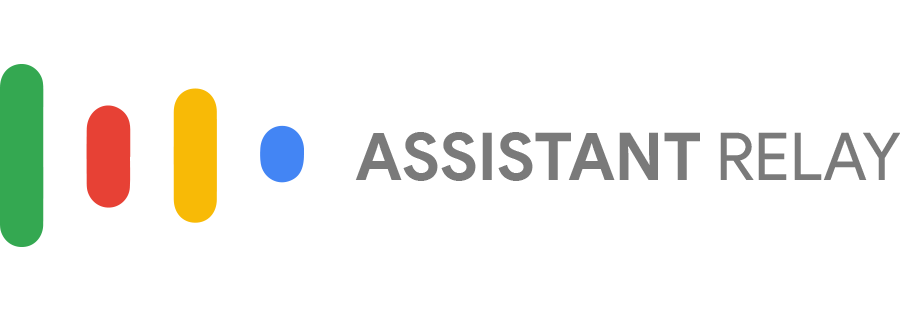
<style>
.page{position:relative;width:900px;height:310px;background:#ffffff}
.page>*{position:absolute;margin:0}
.t1{font:66px "ProductSans-Bold";color:#7a7a7a}
.t2{font:66px "ProductSans-Regular";color:#7a7a7a}
</style>
<div class="page">
<p class="t1" style="left:355px;top:132px;width:546px;height:49px">ASSISTANT <span class="t2">RELAY</span></p>
</div>
